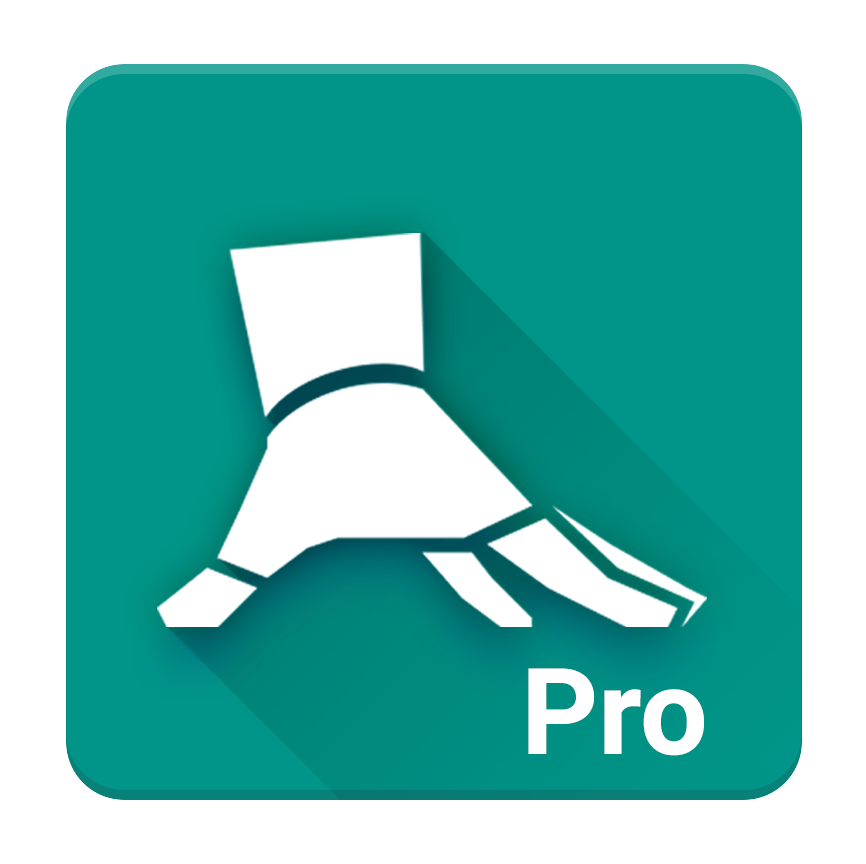
<style>
.page{position:relative;width:866px;height:864px;background:#ffffff}
.page>*{position:absolute;margin:0}
.t1{font:120px "Roboto-Bold";color:#ffffff}
</style>
<div class="page">
<p class="t1" style="left:528px;top:668px;width:176px;height:88px">Pro</p>
</div>
